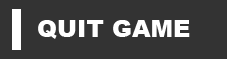
<style>
.page{position:relative;width:227px;height:59px;background:#333333}
.page>*{position:absolute;margin:0}
.t1{font:24px "Arial-Black";color:#ffffff;text-transform:uppercase}
</style>
<div class="page">
<p class="t1" style="left:38px;top:20px;width:152px;height:19px">Quit Game</p>
</div>
